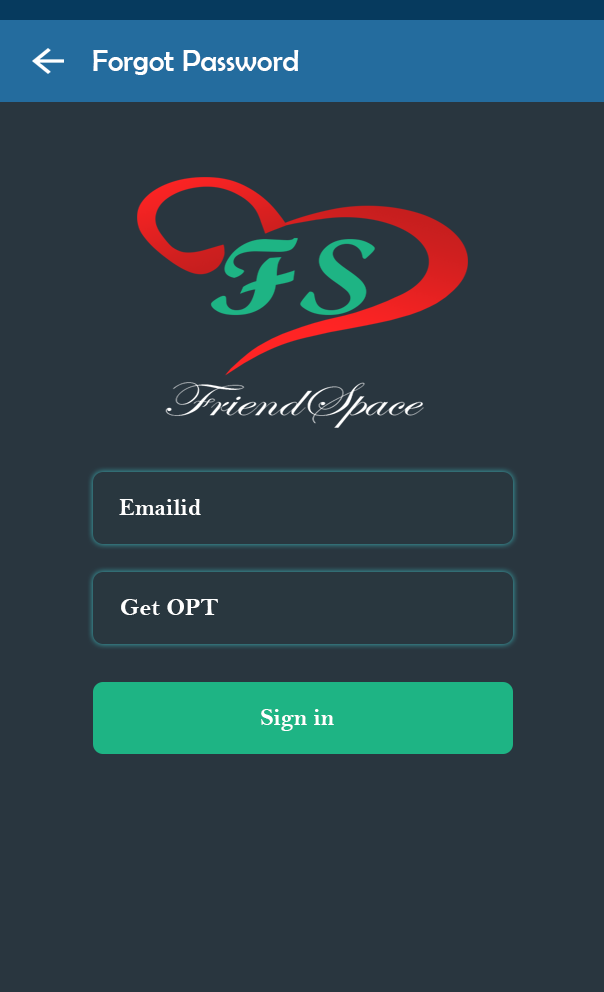
<style>
.page{position:relative;width:604px;height:992px;background:#29363f}
.page>*{position:absolute;margin:0}
.t1{font:30px "BerlinSansFB-Reg";color:#ffffff}
.t2{font:24px "BellMTBold";color:#ffffff}
</style>
<div class="page">
<p class="t1" style="left:93px;top:50px;width:206px;height:25px">Forgot Password</p>
<p class="t2" style="left:119px;top:499px;width:82px;height:16px">Emailid</p>
<p class="t2" style="left:121px;top:599px;width:97px;height:16px">Get OPT</p>
<p class="t2" style="left:261px;top:709px;width:73px;height:22px">Sign in</p>
</div>
